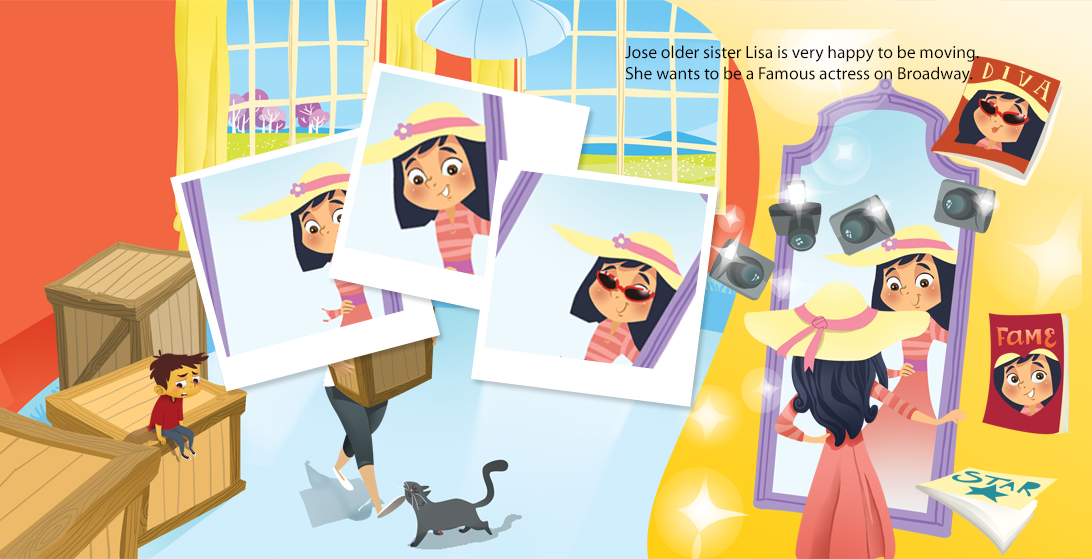
<style>
.page{position:relative;width:1092px;height:559px}
.page>*{position:absolute;margin:0}
.t1{font:17.7px "MyriadPro-Regular";color:#030303}
</style>
<div class="page">
<p class="t1" style="left:625px;top:45px;width:354px;height:38px">Jose older sister Lisa is very happy to be moving. <br>She wants to be a Famous actress on Broadway.</p>
</div>
